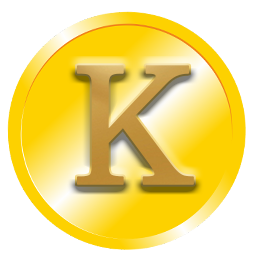
<style>
.page{position:relative;width:256px;height:256px;background:#ffffff}
.page>*{position:absolute;margin:0}
.t1{font:172.5px "STZhongsong";letter-spacing:-0.004em;color:#c0913f;text-transform:uppercase;font-weight:bold}
</style>
<div class="page">
<p class="t1" style="left:76px;top:65px;width:118px;height:120px">k</p>
</div>
